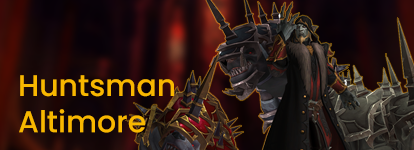
<style>
.page{position:relative;width:414px;height:150px}
.page>*{position:absolute;margin:0}
.t1{font:30px/36.3px "Poppins-Medium";color:#f8b700}
</style>
<div class="page">
<p class="t1" style="left:19px;top:75px;width:155px;height:58px">Huntsman <br>Altimore</p>
</div>
